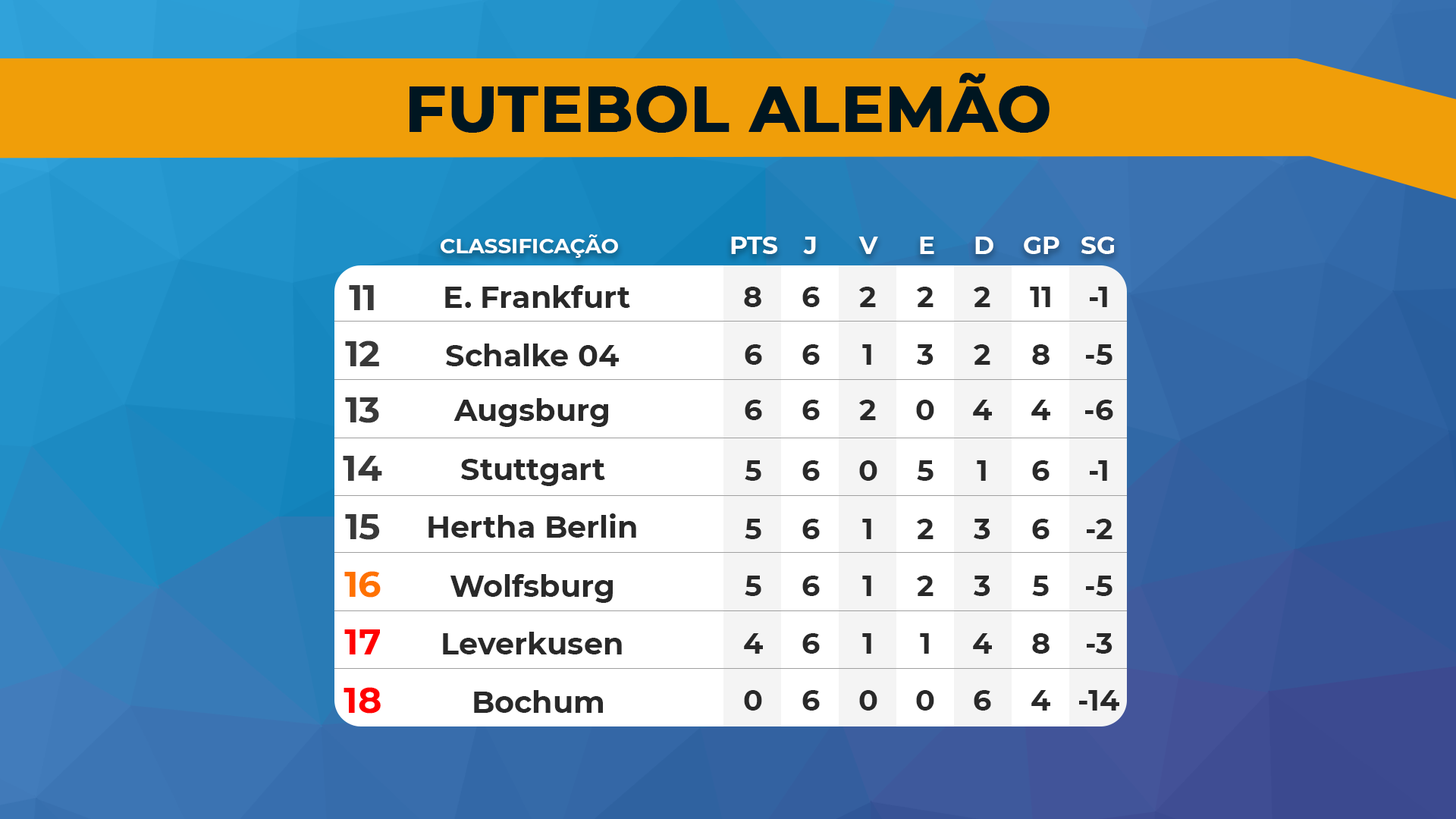
<style>
.page{position:relative;width:1456px;height:819px}
.page>*{position:absolute;margin:0}
.t1{font:63.7px "Montserrat-Bold";color:#001621;text-transform:uppercase;font-weight:bold}
.t2{font:21.1px "Montserrat-Bold";color:#ffffff}
.t3{font:24.8px "Montserrat-Bold";color:#ffffff}
.t4{font:36.2px "Montserrat-Bold";color:#393939}
.t5{font:30.1px "Montserrat-Bold";color:#292929}
.t6{font:28.9px "Montserrat-Bold";color:#292929}
.t7{font:36.2px "Montserrat-Bold";color:#ff7200}
.t8{font:36.2px "Montserrat-Bold";color:#ff0000}
</style>
<div class="page">
<p class="t1" style="left:409px;top:73px;width:641px;height:60px">FUTEBOL ALEMÃO</p>
<p class="t2" style="left:441px;top:234px;width:177px;height:24px">CLASSIFICAÇÃO</p>
<p class="t3" style="left:731px;top:237px;width:46px;height:17px">PTS</p>
<p class="t3" style="left:803px;top:237px;width:13px;height:17px">J</p>
<p class="t3" style="left:858px;top:237px;width:20px;height:17px">V</p>
<p class="t3" style="left:920px;top:237px;width:14px;height:17px">E</p>
<p class="t3" style="left:975px;top:237px;width:18px;height:17px">D</p>
<p class="t3" style="left:1024px;top:237px;width:35px;height:17px">GP</p>
<p class="t3" style="left:1081px;top:237px;width:34px;height:17px">SG</p>
<p class="t4" style="left:349px;top:285px;width:25px;height:25px">11</p>
<p class="t5" style="left:445px;top:285px;width:185px;height:23px">E. Frankfurt</p>
<p class="t6" style="left:744px;top:287px;width:17px;height:20px">8</p>
<p class="t6" style="left:802px;top:287px;width:18px;height:20px">6</p>
<p class="t6" style="left:859px;top:287px;width:17px;height:20px">2</p>
<p class="t6" style="left:917px;top:287px;width:16px;height:20px">2</p>
<p class="t6" style="left:974px;top:287px;width:16px;height:20px">2</p>
<p class="t6" style="left:1030px;top:287px;width:20px;height:20px">11</p>
<p class="t6" style="left:1090px;top:287px;width:17px;height:20px">-1</p>
<p class="t4" style="left:345px;top:340px;width:34px;height:26px">12</p>
<p class="t5" style="left:446px;top:344px;width:173px;height:22px">Schalke 04</p>
<p class="t6" style="left:745px;top:344px;width:17px;height:21px">6</p>
<p class="t6" style="left:802px;top:344px;width:18px;height:21px">6</p>
<p class="t6" style="left:862px;top:344px;width:9px;height:21px">1</p>
<p class="t6" style="left:917px;top:344px;width:16px;height:21px">3</p>
<p class="t6" style="left:974px;top:344px;width:16px;height:21px">2</p>
<p class="t6" style="left:1032px;top:344px;width:18px;height:21px">8</p>
<p class="t6" style="left:1086px;top:344px;width:26px;height:21px">-5</p>
<p class="t4" style="left:345px;top:397px;width:34px;height:26px">13</p>
<p class="t5" style="left:453px;top:398px;width:155px;height:29px">Augsburg</p>
<p class="t6" style="left:745px;top:400px;width:17px;height:20px">6</p>
<p class="t6" style="left:802px;top:400px;width:18px;height:20px">6</p>
<p class="t6" style="left:859px;top:400px;width:17px;height:20px">2</p>
<p class="t6" style="left:916px;top:400px;width:18px;height:20px">0</p>
<p class="t6" style="left:973px;top:400px;width:19px;height:20px">4</p>
<p class="t6" style="left:1031px;top:400px;width:19px;height:20px">4</p>
<p class="t6" style="left:1085px;top:400px;width:28px;height:20px">-6</p>
<p class="t4" style="left:343px;top:456px;width:39px;height:25px">14</p>
<p class="t5" style="left:461px;top:459px;width:144px;height:27px">Stuttgart</p>
<p class="t6" style="left:745px;top:460px;width:16px;height:21px">5</p>
<p class="t6" style="left:802px;top:460px;width:18px;height:21px">6</p>
<p class="t6" style="left:859px;top:460px;width:18px;height:21px">0</p>
<p class="t6" style="left:917px;top:460px;width:16px;height:21px">5</p>
<p class="t6" style="left:977px;top:460px;width:9px;height:21px">1</p>
<p class="t6" style="left:1032px;top:460px;width:18px;height:21px">6</p>
<p class="t6" style="left:1090px;top:460px;width:17px;height:21px">-1</p>
<p class="t4" style="left:345px;top:514px;width:35px;height:26px">15</p>
<p class="t5" style="left:428px;top:513px;width:208px;height:25px">Hertha Berlin</p>
<p class="t6" style="left:745px;top:519px;width:16px;height:20px">5</p>
<p class="t6" style="left:802px;top:519px;width:18px;height:20px">6</p>
<p class="t6" style="left:862px;top:519px;width:9px;height:20px">1</p>
<p class="t6" style="left:917px;top:519px;width:16px;height:20px">2</p>
<p class="t6" style="left:974px;top:519px;width:16px;height:20px">3</p>
<p class="t6" style="left:1032px;top:519px;width:18px;height:20px">6</p>
<p class="t6" style="left:1087px;top:519px;width:25px;height:20px">-2</p>
<p class="t7" style="left:344px;top:571px;width:37px;height:27px">16</p>
<p class="t5" style="left:450px;top:574px;width:163px;height:29px">Wolfsburg</p>
<p class="t6" style="left:745px;top:576px;width:16px;height:20px">5</p>
<p class="t6" style="left:802px;top:576px;width:18px;height:20px">6</p>
<p class="t6" style="left:862px;top:576px;width:9px;height:20px">1</p>
<p class="t6" style="left:917px;top:576px;width:16px;height:20px">2</p>
<p class="t6" style="left:974px;top:576px;width:16px;height:20px">3</p>
<p class="t6" style="left:1032px;top:576px;width:17px;height:20px">5</p>
<p class="t6" style="left:1086px;top:576px;width:26px;height:20px">-5</p>
<p class="t8" style="left:344px;top:629px;width:36px;height:25px">17</p>
<p class="t5" style="left:443px;top:632px;width:179px;height:22px">Leverkusen</p>
<p class="t6" style="left:744px;top:633px;width:19px;height:21px">4</p>
<p class="t6" style="left:802px;top:633px;width:18px;height:21px">6</p>
<p class="t6" style="left:862px;top:633px;width:9px;height:21px">1</p>
<p class="t6" style="left:920px;top:633px;width:9px;height:21px">1</p>
<p class="t6" style="left:973px;top:633px;width:19px;height:21px">4</p>
<p class="t6" style="left:1032px;top:633px;width:18px;height:21px">8</p>
<p class="t6" style="left:1087px;top:633px;width:25px;height:21px">-3</p>
<p class="t8" style="left:344px;top:687px;width:37px;height:27px">18</p>
<p class="t5" style="left:474px;top:690px;width:129px;height:23px">Bochum</p>
<p class="t6" style="left:744px;top:690px;width:18px;height:21px">0</p>
<p class="t6" style="left:802px;top:690px;width:18px;height:21px">6</p>
<p class="t6" style="left:859px;top:690px;width:18px;height:21px">0</p>
<p class="t6" style="left:916px;top:690px;width:18px;height:21px">0</p>
<p class="t6" style="left:974px;top:690px;width:17px;height:21px">6</p>
<p class="t6" style="left:1031px;top:690px;width:19px;height:21px">4</p>
<p class="t6" style="left:1079px;top:690px;width:40px;height:21px">-14</p>
</div>
